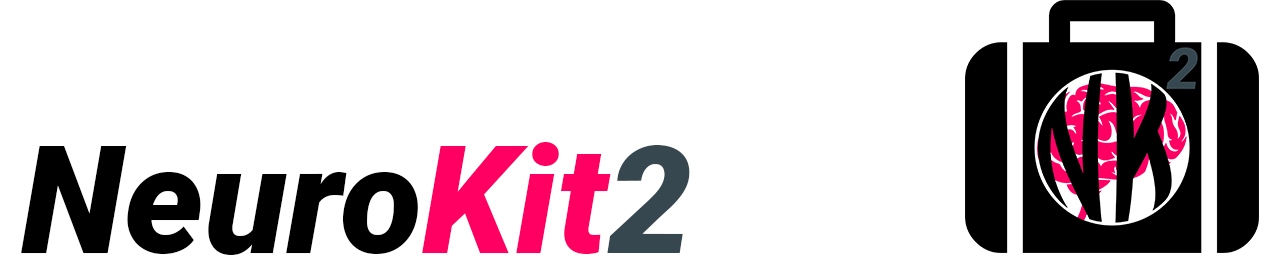
<style>
.page{position:relative;width:1280px;height:265px;background:#ffffff}
.page>*{position:absolute;margin:0}
.t1{font:150px "Roboto-BlackItalic";color:#000000}
.t2{font:150px "Roboto-BlackItalic";color:#ff0062}
.t3{font:150px "Roboto-BlackItalic";color:#37474f}
</style>
<div class="page">
<p class="t1" style="left:21px;top:142px;width:669px;height:113px">Neuro<span class="t2">Kit</span><span class="t3">2</span></p>
</div>
